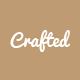
<style>
.page{position:relative;width:80px;height:80px;background:#be9b73}
.page>*{position:absolute;margin:0}
.t1{font:18px "Pacifico";color:#ffffff}
</style>
<div class="page">
<p class="t1" style="left:10px;top:30px;width:60px;height:22px">Crafted</p>
</div>
